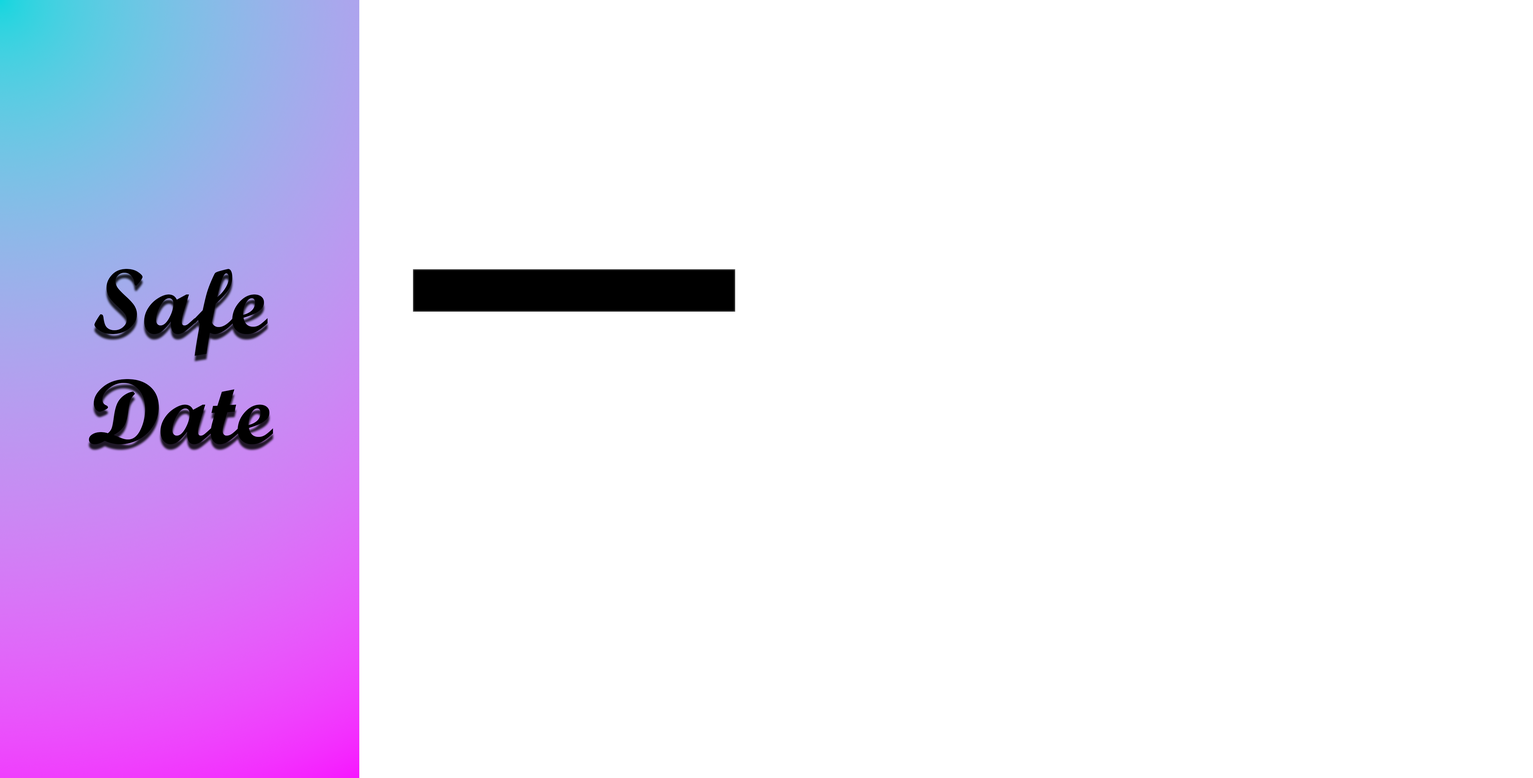
<style>
.page{position:relative;width:1533px;height:778px;background:#ffffff}
.page>*{position:absolute;margin:0}
.t1{font:91.8px "ScriptMTBold";color:#000000;scale:1.04 1}
</style>
<div class="page">
<p class="t1" style="left:89px;top:269px;width:184px;height:175px;text-align:center">Safe<br>Date</p>
</div>
